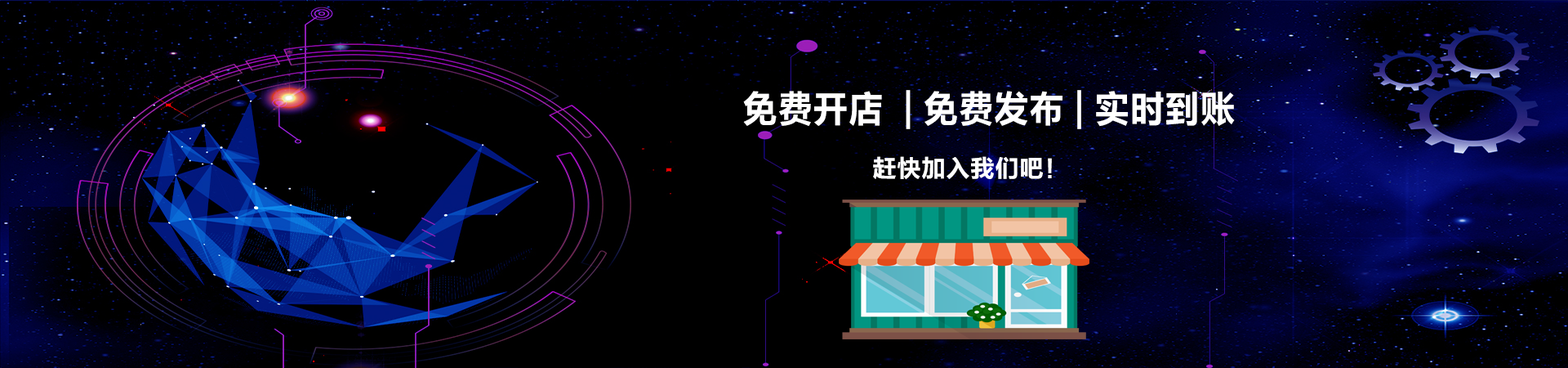
<style>
.page{position:relative;width:1568px;height:368px;background:#000000}
.page>*{position:absolute;margin:0}
.t1{font:37.8px "FZLTCHK--GBK1-0";color:#ffffff;text-transform:uppercase;scale:0.93 1}
.t2{font:24.5px "FZLTCHK--GBK1-0";color:#ffffff;text-transform:uppercase}
</style>
<div class="page">
<p class="t1" style="left:743px;top:90px;width:492px;height:39px">免费开店  | 免费发布 | 实时到账</p>
<p class="t2" style="left:873px;top:156px;width:179px;height:24px">赶快加入我们吧！</p>
</div>
